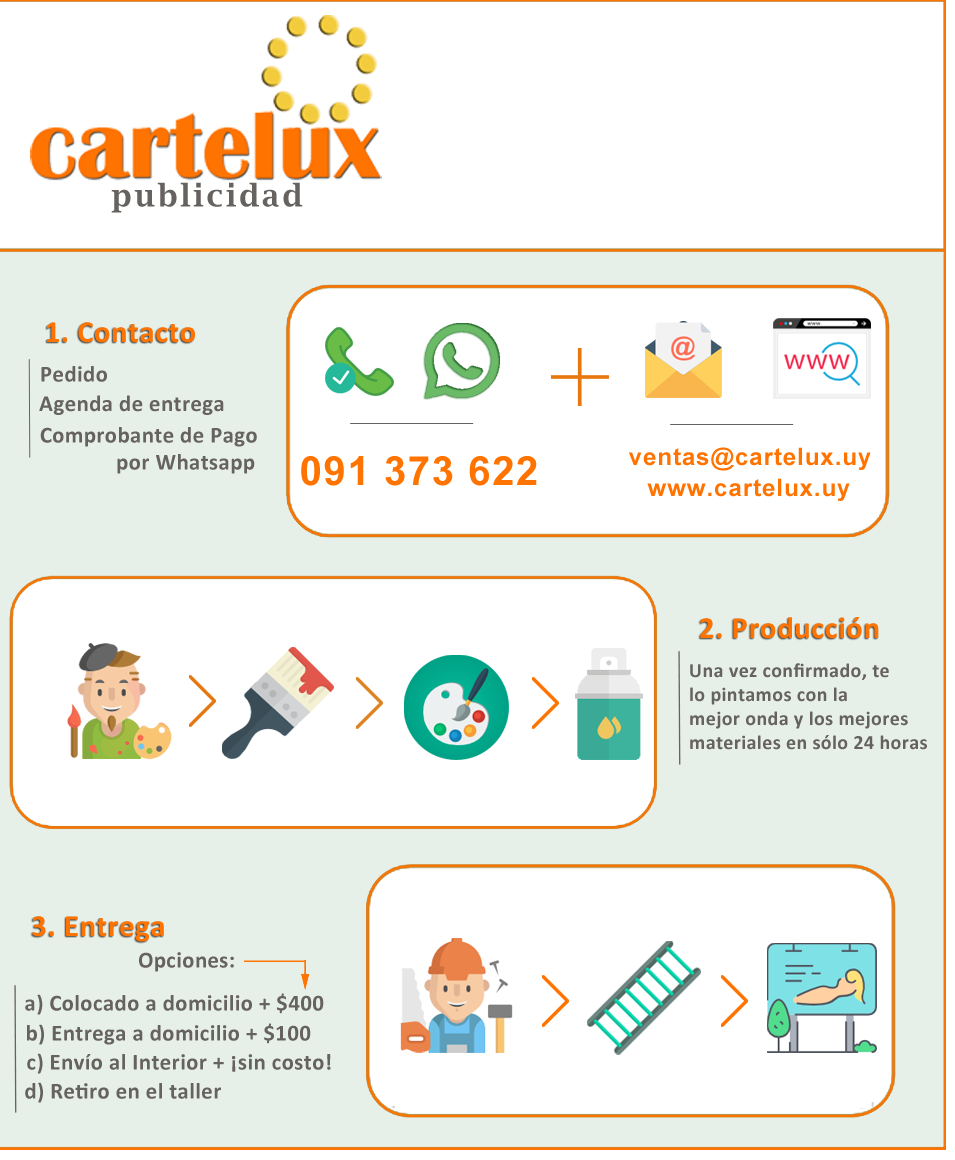
<style>
.page{position:relative;width:955px;height:1160px;background:#ffffff}
.page>*{position:absolute;margin:0}
.t1{font:30.7px "LucidaBright-Demi";letter-spacing:0.1em;color:#666260}
.t2{font:30.7px "Calibri-Bold";letter-spacing:0.02em;color:#ff7300}
.t3{font:22.7px "Calibri-Bold";letter-spacing:0.02em;color:#666260}
.t4{font:24px "Arial-BoldMT";letter-spacing:0.04em;color:#ff7300}
.t5{font:40px "Arial-BoldMT";letter-spacing:0.04em;color:#ff7300}
.t6{font:20px "Calibri-Bold";letter-spacing:0.02em;color:#666260}
</style>
<div class="page">
<p class="t1" style="left:111px;top:182px;width:192px;height:31px">publicidad</p>
<p class="t2" style="left:47px;top:322px;width:148px;height:21px">1. Contacto</p>
<p class="t3" style="left:41px;top:366px;width:66px;height:16px">Pedido</p>
<p class="t3" style="left:39px;top:395px;width:185px;height:20px">Agenda de entrega</p>
<p class="t3" style="left:40px;top:427px;width:217px;height:20px">Comprobante de Pago</p>
<p class="t4" style="left:629px;top:447px;width:242px;height:24px">ventas@cartelux.uy</p>
<p class="t3" style="left:117px;top:454px;width:138px;height:20px">por Whatsapp</p>
<p class="t5" style="left:301px;top:456px;width:236px;height:30px">091 373 622</p>
<p class="t4" style="left:647px;top:478px;width:203px;height:23px">www.cartelux.uy</p>
<p class="t2" style="left:700px;top:617px;width:179px;height:22px">2. Producción</p>
<p class="t6" style="left:690px;top:663px;width:237px;height:87px">Una vez confirmado, te <br>lo pintamos con la <br>mejor onda y los mejores<br>materiales en sólo 24 horas</p>
<p class="t2" style="left:32px;top:916px;width:132px;height:26px">3. Entrega</p>
<p class="t3" style="left:139px;top:952px;width:95px;height:20px">Opciones:</p>
<p class="t3" style="left:25px;top:993px;width:299px;height:22px">a) Colocado a domicilio + $400</p>
<p class="t3" style="left:27px;top:1023px;width:284px;height:22px">b) Entrega a domicilio + $100</p>
<p class="t3" style="left:27px;top:1053px;width:304px;height:21px">c) Envío al Interior + ¡sin costo!</p>
<p class="t3" style="left:25px;top:1082px;width:196px;height:21px">d) Retiro en el taller</p>
</div>
